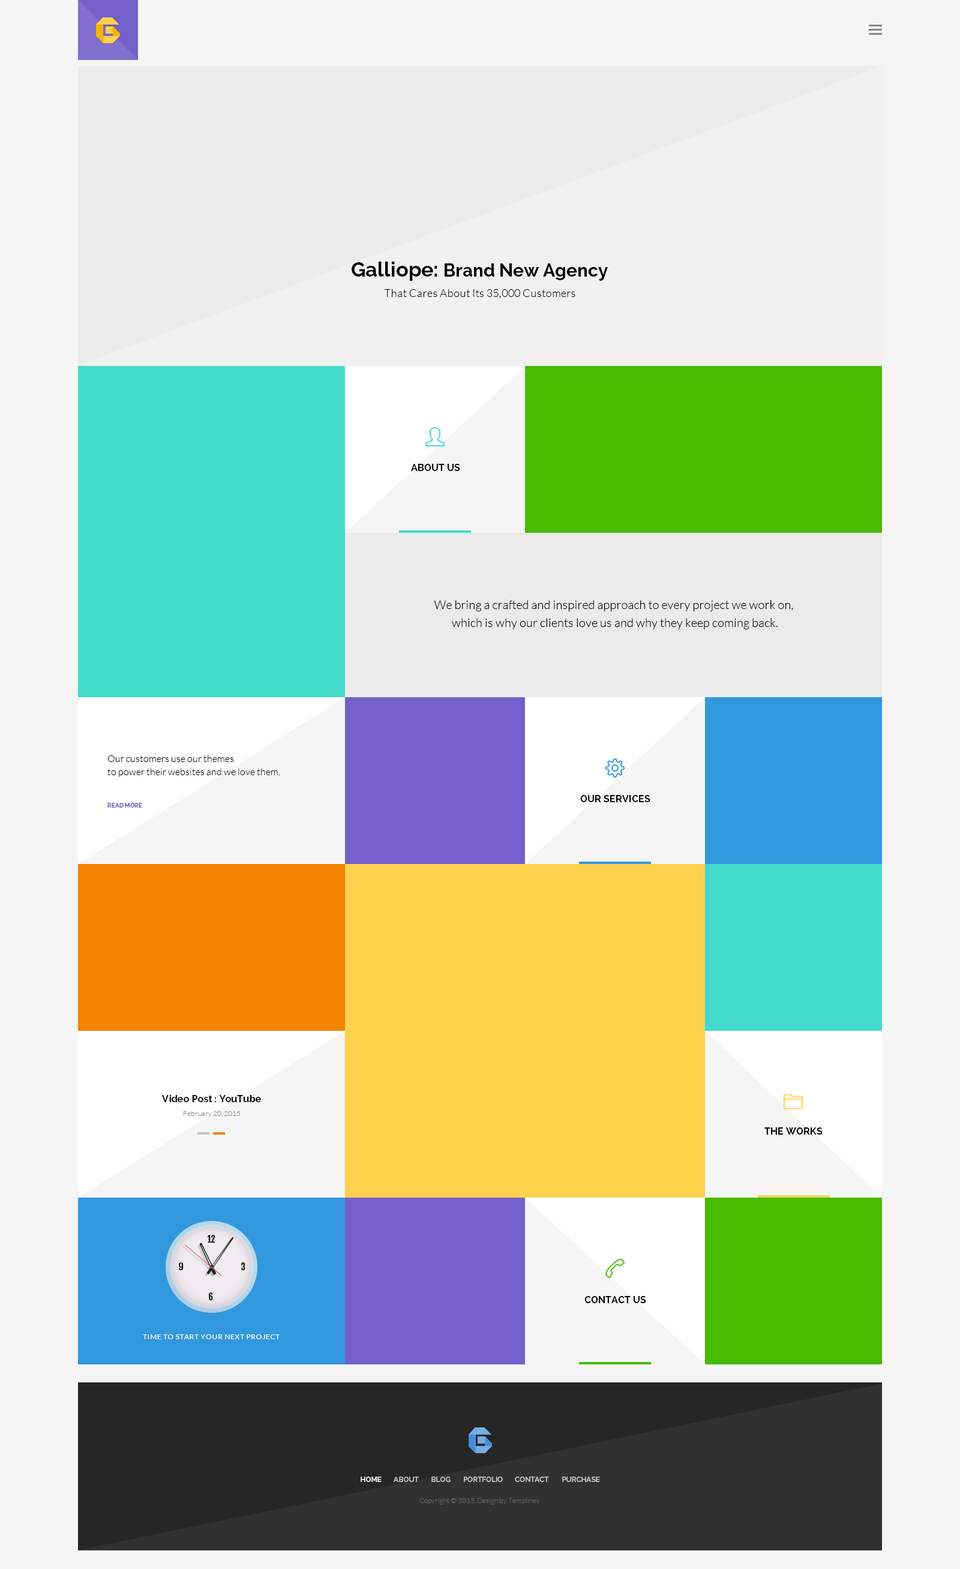
<style>
.page{position:relative;width:960px;height:1569px;background:#f5f5f5}
.page>*{position:absolute;margin:0}
.t1{font:18px "Raleway-Bold";color:#000000}
.t2{font:20.4px "Raleway-Bold";color:#000000}
.t3{font:10.8px "Lato-Light";letter-spacing:0.025em;color:#000000}
.t4{font:9.6px "Raleway-Bold";color:#000000}
.t5{font:12px/18px "Lato-Light";color:#000000}
.t6{font:9.6px/13.2px "Lato-Light";color:#000000}
.t7{font:6px "Raleway-Bold";color:#7460ca}
.t8{font:7.2px "Lato-Light";color:#888888}
.t9{font:9px "FjallaOne";color:#000000;font-weight:bold}
.t10{font:7.2px "Lato-Regular";letter-spacing:0.05em;color:#ffffff;text-transform:uppercase}
.t11{font:7.2px "Raleway-SemiBold";color:#ffffff}
.t12{font:7.2px "Raleway-SemiBold";color:#cccccc}
.t13{font:7.2px "Lato-Light";color:#666666}
</style>
<div class="page">
<p class="t1" style="left:352px;top:262px;width:256px;height:19px"><span class="t2">Galliope: </span>Brand New Agency</p>
<p class="t3" style="left:384px;top:289px;width:191px;height:10px">That Cares About Its 35,000 Customers</p>
<p class="t4" style="left:411px;top:464px;width:49px;height:7px">ABOUT US</p>
<p class="t5" style="left:434px;top:600px;width:359px;height:29px;text-align:center">We bring a crafted and inspired approach to every project we work on, <br>which is why our clients love us and why they keep coming back.</p>
<p class="t6" style="left:107px;top:755px;width:173px;height:22px">Our customers use our themes<br>to power their websites and we love them.</p>
<p class="t4" style="left:580px;top:795px;width:70px;height:7px">OUR SERVICES</p>
<p class="t7" style="left:107px;top:803px;width:35px;height:5px">READ MORE</p>
<p class="t4" style="left:162px;top:1095px;width:99px;height:7px">Video Post : YouTube</p>
<p class="t8" style="left:184px;top:1111px;width:57px;height:6px">February 20, 2015</p>
<p class="t4" style="left:764px;top:1127px;width:59px;height:8px">THE WORKS</p>
<p class="t9" style="left:207px;top:1235px;width:8px;height:8px">12</p>
<p class="t9" style="left:179px;top:1262px;width:5px;height:9px">9</p>
<p class="t9" style="left:241px;top:1262px;width:4px;height:9px">3</p>
<p class="t9" style="left:209px;top:1292px;width:4px;height:9px">6</p>
<p class="t4" style="left:584px;top:1296px;width:62px;height:7px">CONTACT US</p>
<p class="t10" style="left:143px;top:1334px;width:137px;height:5px">Time To Start Your Next Project</p>
<p class="t11" style="left:361px;top:1477px;width:21px;height:5px">HOME</p>
<p class="t12" style="left:394px;top:1477px;width:25px;height:5px">ABOUT</p>
<p class="t12" style="left:431px;top:1477px;width:20px;height:5px">BLOG</p>
<p class="t12" style="left:464px;top:1477px;width:39px;height:5px">PORTFOLIO</p>
<p class="t12" style="left:515px;top:1477px;width:34px;height:5px">CONTACT</p>
<p class="t12" style="left:562px;top:1477px;width:38px;height:5px">PURCHASE</p>
<p class="t13" style="left:419px;top:1498px;width:120px;height:7px">Copyright © 2015. Design by Templines</p>
</div>
